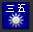
<style>
.page{position:relative;width:33px;height:32px;background:#000090}
.page>*{position:absolute;margin:0}
.t1{font:10.4px "SimSun";color:#ffffff}
</style>
<div class="page">
<p class="t1" style="left:6px;top:4px;width:19px;height:8px">三五</p>
</div>
